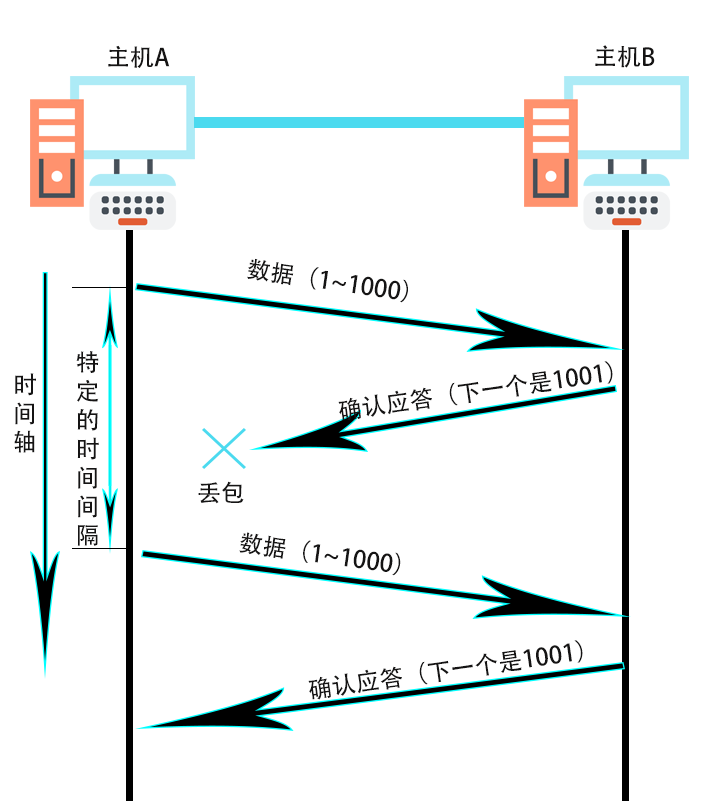
<style>
.page{position:relative;width:705px;height:801px;background:#ffffff}
.page>*{position:absolute;margin:0}
.t1{font:24px "AdobeHeitiStd-Regular";color:#151414}
</style>
<div class="page">
<p class="t1" style="left:108px;top:45px;width:62px;height:23px">主机A</p>
<p class="t1" style="left:595px;top:45px;width:60px;height:23px">主机B</p>
<p class="t1" style="left:247px;top:258px;width:161px;height:45px;rotate:8deg">数据（1~1000）</p>
<p class="t1" style="left:76px;top:351px;width:23px;height:195px">特<br>定<br>的<br>时<br>间<br>间<br>隔</p>
<p class="t1" style="left:338px;top:361px;width:275px;height:60px;rotate:-8deg">确认应答（下一个是1001）</p>
<p class="t1" style="left:14px;top:373px;width:22px;height:80px">时<br>间<br>轴</p>
<p class="t1" style="left:198px;top:481px;width:46px;height:23px">丢包</p>
<p class="t1" style="left:239px;top:532px;width:162px;height:44px;rotate:8deg">数据（1~1000）</p>
<p class="t1" style="left:308px;top:640px;width:275px;height:60px;rotate:-8deg">确认应答（下一个是1001）</p>
</div>
